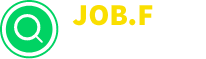
<style>
.page{position:relative;width:206px;height:59px;background:#ffffff}
.page>*{position:absolute;margin:0}
.t1{font:30px "SourceSansPro-Black";color:#fadf00;text-transform:uppercase}
</style>
<div class="page">
<p class="t1" style="left:72px;top:5px;width:81px;height:21px">job.F</p>
</div>
